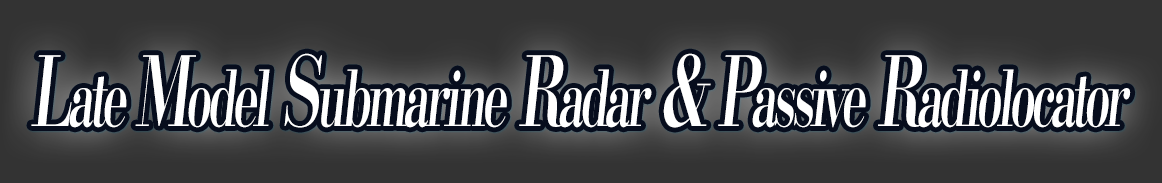
<style>
.page{position:relative;width:1162px;height:183px;background:#333333}
.page>*{position:absolute;margin:0}
.t1{font:76.8px "KochoStd-Heavy";letter-spacing:-0.08em;color:#ffffff;font-style:italic;scale:0.61 1}
.t2{font:96px "KochoStd-Heavy";letter-spacing:-0.08em;color:#ffffff;font-style:italic;scale:0.61 1}
</style>
<div class="page">
<p class="t1" style="left:31px;top:53px;width:1100px;height:75px"><span class="t2">L</span>ate <span class="t2">M</span>odel<span class="t2"> S</span>ubmarine<span class="t2"> R</span>adar<span class="t2"> &amp; P</span>assive<span class="t2"> R</span>adiolocator</p>
</div>
